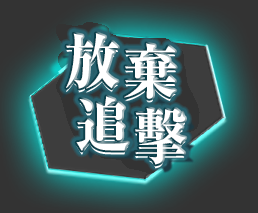
<style>
.page{position:relative;width:258px;height:213px}
.page>*{position:absolute;margin:0}
.t1{font:60px "RyuminPr6N-ExBold";color:#ffffff;scale:0.95 1}
.t2{font:60px "RyuminPr6N-ExBold";color:#ffffff;scale:0.94 1}
.t3{font:60px "RyuminPr6N-ExBold";color:#ffffff;scale:0.93 1}
.t4{font:60px "RyuminPr6N-ExBold";color:#ffffff;scale:0.91 1}
</style>
<div class="page">
<p class="t1" style="left:66px;top:33px;width:52px;height:56px">放</p>
<p class="t1" style="left:66px;top:33px;width:52px;height:56px">放</p>
<p class="t2" style="left:124px;top:43px;width:52px;height:56px">棄</p>
<p class="t2" style="left:124px;top:43px;width:52px;height:56px">棄</p>
<p class="t3" style="left:76px;top:96px;width:53px;height:55px">追</p>
<p class="t3" style="left:76px;top:96px;width:53px;height:55px">追</p>
<p class="t4" style="left:135px;top:108px;width:51px;height:57px">擊</p>
<p class="t4" style="left:135px;top:108px;width:51px;height:57px">擊</p>
</div>
